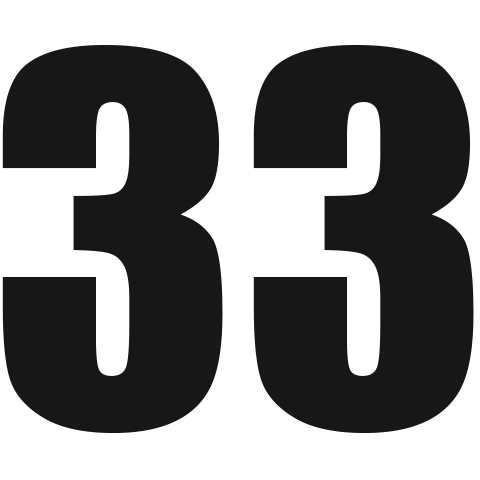
<style>
.page{position:relative;width:480px;height:480px;background:#171717}
.page>*{position:absolute;margin:0}
.t1{font:472.3px "Impact";color:#171717}
</style>
<div class="page">
<p class="t1" style="left:2px;top:45px;width:472px;height:388px">33</p>
</div>
